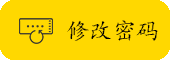
<style>
.page{position:relative;width:170px;height:60px;background:#ffd800}
.page>*{position:absolute;margin:0}
.t1{font:23.3px "¿¬Ìå";color:#000000}
</style>
<div class="page">
<p class="t1" style="left:67px;top:20px;width:91px;height:21px">修改密码</p>
</div>
